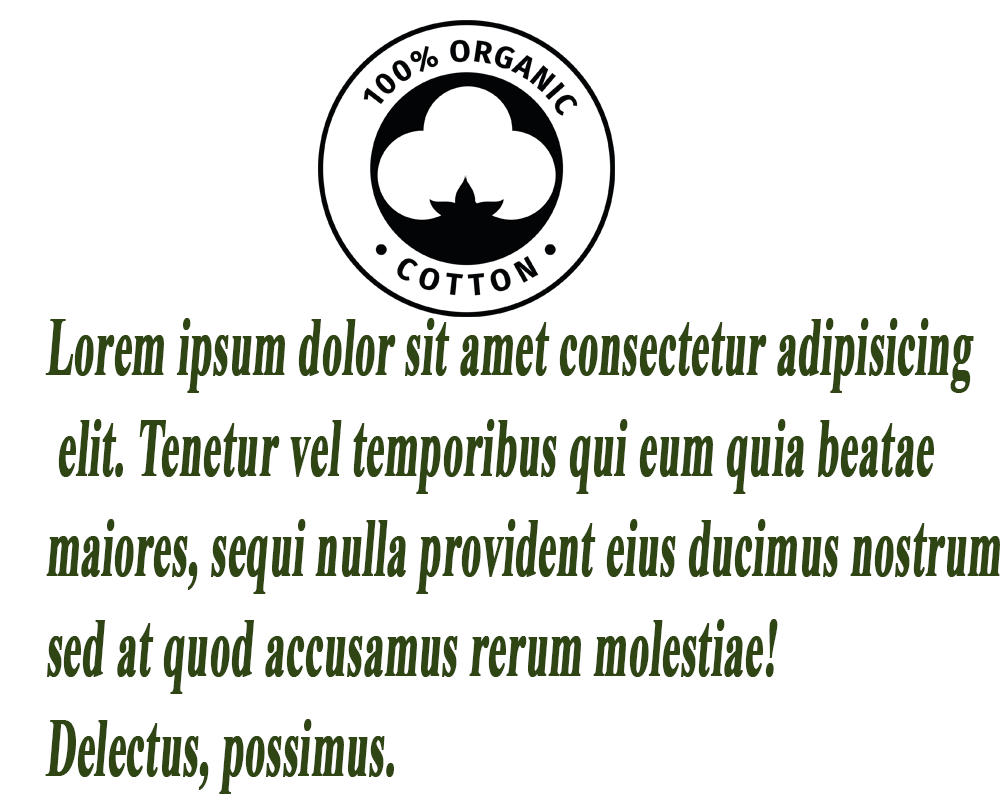
<style>
.page{position:relative;width:1000px;height:800px;background:#ffffff}
.page>*{position:absolute;margin:0}
.t1{font:83.5px "TimesNewRomanPS-BoldMT";color:#304514;font-weight:bold;font-style:italic;scale:0.48 1}
</style>
<div class="page">
<p class="t1" style="left:45px;top:318px;width:955px;height:476px">Lorem ipsum dolor sit amet consectetur adipisicing<br> elit. Tenetur vel temporibus qui eum quia beatae <br>maiores, sequi nulla provident eius ducimus nostrum <br>sed at quod accusamus rerum molestiae! <br>Delectus, possimus.</p>
</div>
